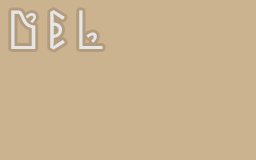
<style>
.page{position:relative;width:256px;height:160px;background:#ccb38f}
.page>*{position:absolute;margin:0}
.t1{font:48px "NotoSansLinearB-Regular";letter-spacing:0.1em;color:#e6e6e6}
</style>
<div class="page">
<p class="t1" style="left:11px;top:10px;width:92px;height:40px">𐀃𐀟𐀨</p>
</div>
